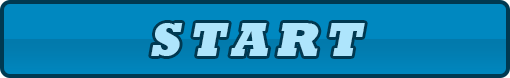
<style>
.page{position:relative;width:510px;height:78px;background:#0088c0}
.page>*{position:absolute;margin:0}
.t1{font:48.6px "Rockwell-ExtraBold";letter-spacing:0.16em;color:#aee5fc;font-style:italic}
</style>
<div class="page">
<p class="t1" style="left:151px;top:23px;width:214px;height:33px">START</p>
</div>
